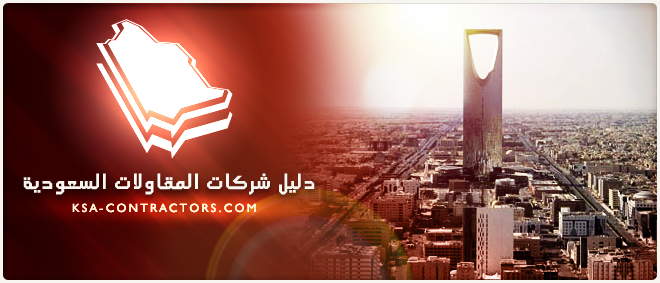
<style>
.page{position:relative;width:660px;height:283px}
.page>*{position:absolute;margin:0}
.t1{font:21px "FS_Metal";color:#f7f5ef;text-transform:uppercase}
.t2{font:12px "Humanist521BT-Roman";letter-spacing:0.2em;color:#f7f5ef;text-transform:uppercase}
</style>
<div class="page">
<p class="t1" style="left:23px;top:173px;width:292px;height:22px">دليل شركات المقاولات السعودية</p>
<p class="t2" style="left:72px;top:203px;width:184px;height:10px">KSA-Contractors.com</p>
</div>
